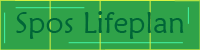
<style>
.page{position:relative;width:200px;height:50px;background:#2fa249}
.page>*{position:absolute;margin:0}
.t1{font:30px "MaiandraGD-Regular";color:#006637}
</style>
<div class="page">
<p class="t1" style="left:16px;top:11px;width:168px;height:28px">Spos Lifeplan</p>
</div>
